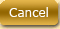
<style>
.page{position:relative;width:60px;height:29px}
.page>*{position:absolute;margin:0}
.t1{font:12px "Verdana";color:#ffffff}
</style>
<div class="page">
<p class="t1" style="left:9px;top:7px;width:39px;height:10px">Cancel</p>
</div>
